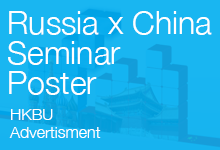
<style>
.page{position:relative;width:220px;height:150px;background:#19b6f1}
.page>*{position:absolute;margin:0}
.t1{font:32px/30px "HelveticaNeue-Light";color:#ffffff}
.t2{font:16px/18px "HelveticaNeue-Light";color:#ffffff}
</style>
<div class="page">
<p class="t1" style="left:8px;top:11px;width:204px;height:84px">Russia x China<br>Seminar<br>Poster</p>
<p class="t2" style="left:9px;top:109px;width:92px;height:29px">HKBU<br>Advertisment</p>
</div>
